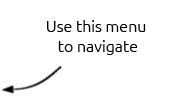
<style>
.page{position:relative;width:170px;height:100px;background:#ffffff}
.page>*{position:absolute;margin:0}
.t1{font:16px "Ubuntu-Light";color:#000000}
</style>
<div class="page">
<p class="t1" style="left:47px;top:20px;width:99px;height:35px;text-align:center">Use this menu <br>to navigate</p>
</div>
